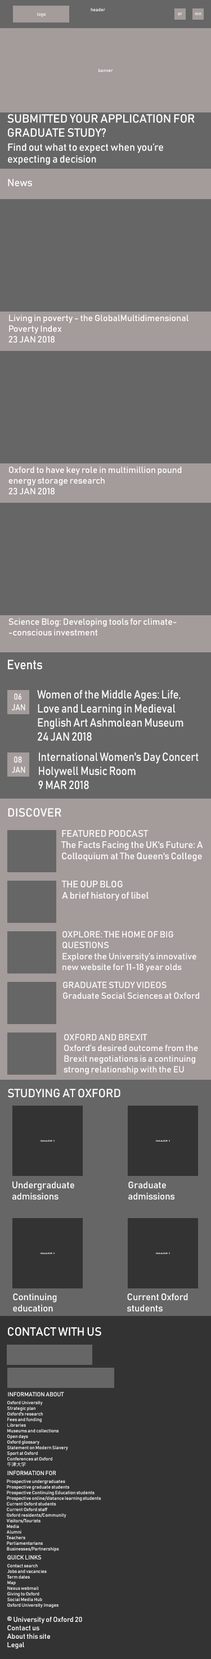
<style>
.page{position:relative;width:211px;height:1659px;background:#666666}
.page>*{position:absolute;margin:0}
.t1{font:4.7px "Bahnschrift";color:#ffffff}
.t2{font:11.7px "Bahnschrift";color:#ffffff}
.t3{font:10.1px "Bahnschrift";color:#ffffff}
.t4{font:9px "Bahnschrift";color:#ffffff}
.t5{font:13.2px "Bahnschrift";color:#ffffff;scale:0.9 1}
.t6{font:8.5px "Bahnschrift";color:#ffffff;scale:0.9 1}
.t7{font:11.7px "Bahnschrift";color:#ffffff;scale:0.9 1}
.t8{font:9.4px "Bahnschrift";color:#ffffff}
.t9{font:1.9px "Bahnschrift";color:#ffffff;scale:2.13 1}
.t10{font:5.9px "Bahnschrift";color:#ffffff}
.t11{font:4.7px "KozGoPr6N-Regular";color:#ffffff}
.t12{font:7px "Bahnschrift";color:#ffffff}
</style>
<div class="page">
<p class="t1" style="left:37px;top:12px;width:9px;height:5px">logo</p>
<p class="t1" style="left:91px;top:8px;width:14px;height:3px">header</p>
<p class="t1" style="left:178px;top:12px;width:4px;height:3px">sr</p>
<p class="t1" style="left:195px;top:12px;width:6px;height:3px">mn</p>
<p class="t1" style="left:98px;top:69px;width:15px;height:3px">banner</p>
<p class="t2" style="left:7px;top:114px;width:188px;height:23px">SUBMITTED YOUR APPLICATION FOR <br>GRADUATE STUDY?</p>
<p class="t3" style="left:8px;top:143px;width:155px;height:22px">Find out what to expect when you’re <br>expecting a decision</p>
<p class="t3" style="left:8px;top:179px;width:24px;height:8px">News</p>
<p class="t4" style="left:8px;top:314px;width:180px;height:29px">Living in poverty - the GlobalMultidimensional <br>Poverty Index<br>23 JAN 2018</p>
<p class="t4" style="left:8px;top:466px;width:174px;height:29px">Oxford to have key role in multimillion pound <br>energy storage research<br>23 JAN 2018</p>
<p class="t4" style="left:8px;top:618px;width:169px;height:18px">Science Blog: Developing tools for climate-<br>-conscious investment</p>
<p class="t5" style="left:8px;top:660px;width:34px;height:10px">Events</p>
<p class="t6" style="left:11px;top:694px;width:14px;height:16px;text-align:center">06 <br>JAN</p>
<p class="t7" style="left:37px;top:690px;width:146px;height:51px">Women of the Middle Ages: Life, <br>Love and Learning in Medieval <br>English Art Ashmolean Museum<br>24 JAN 2018</p>
<p class="t6" style="left:11px;top:757px;width:14px;height:16px;text-align:center">08 <br>JAN</p>
<p class="t7" style="left:38px;top:753px;width:161px;height:37px">International Women's Day Concert<br>Holywell Music Room<br>9 MAR 2018</p>
<p class="t2" style="left:8px;top:808px;width:53px;height:9px">DISCOVER</p>
<p class="t8" style="left:61px;top:830px;width:142px;height:32px">FEATURED PODCAST<br>The Facts Facing the UK's Future: A <br>Colloquium at The Queen's College</p>
<p class="t8" style="left:61px;top:881px;width:87px;height:20px">THE OUP BLOG<br>A brief history of libel</p>
<p class="t4" style="left:62px;top:931px;width:134px;height:42px">OXPLORE: THE HOME OF BIG <br>QUESTIONS<br>Explore the University’s innovative <br>new website for 11-18 year olds</p>
<p class="t4" style="left:63px;top:982px;width:136px;height:17px">GRADUATE STUDY VIDEOS<br>Graduate Social Sciences at Oxford</p>
<p class="t4" style="left:64px;top:1034px;width:134px;height:41px">OXFORD AND BREXIT<br>Oxford’s desired outcome from the <br>Brexit negotiations is a continuing <br>strong relationship with the EU</p>
<p class="t2" style="left:8px;top:1089px;width:112px;height:9px">STUDYING AT OXFORD</p>
<p class="t9" style="left:40px;top:1140px;width:15px;height:2px">IMAGE 1</p>
<p class="t9" style="left:156px;top:1140px;width:14px;height:2px">IMAGE 1</p>
<p class="t8" style="left:12px;top:1182px;width:62px;height:18px">Undergraduate <br>admissions</p>
<p class="t8" style="left:128px;top:1182px;width:46px;height:18px">Graduate <br>admissions</p>
<p class="t9" style="left:40px;top:1253px;width:15px;height:1px">IMAGE 1</p>
<p class="t9" style="left:156px;top:1253px;width:14px;height:1px">IMAGE 1</p>
<p class="t8" style="left:13px;top:1294px;width:44px;height:18px">Continuing <br>education</p>
<p class="t8" style="left:127px;top:1294px;width:61px;height:18px">Current Oxford <br>students</p>
<p class="t2" style="left:8px;top:1328px;width:93px;height:8px">CONTACT WITH US</p>
<p class="t10" style="left:8px;top:1392px;width:56px;height:5px">INFORMATION ABOUT</p>
<p class="t1" style="left:7px;top:1401px;width:61px;height:66px">Oxford University<br>Strategic plan<br>Oxford's research<br>Fees and funding<br>Libraries<br>Museums and collections<br>Open days<br>Oxford glossary<br>Statement on Modern Slavery<br>Sport at Oxford<br>Conferences at Oxford<br><span class="t11">牛津大学</span></p>
<p class="t1" style="left:6px;top:1480px;width:95px;height:72px">Prospective undergraduates<br>Prospective graduate students<br>Prospective Continuing Education students<br>Prospective online/distance learning students<br>Current Oxford students<br>Current Oxford staff<br>Oxford residents/Community<br>Visitors/Tourists<br>Media<br>Alumni<br>Teachers<br>Parliamentarians<br>Businesses/Partnerships</p>
<p class="t10" style="left:7px;top:1471px;width:49px;height:4px">INFORMATION FOR</p>
<p class="t1" style="left:7px;top:1564px;width:51px;height:44px">Contact search<br>Jobs and vacancies<br>Term dates<br>Map<br>Nexus webmail<br>Giving to Oxford<br>Social Media Hub<br>Oxford University Images</p>
<p class="t10" style="left:7px;top:1555px;width:34px;height:5px">QUICK LINKS</p>
<p class="t12" style="left:7px;top:1617px;width:75px;height:32px">© University of Oxford 20<br>Contact us<br>About this site<br>Legal</p>
</div>
